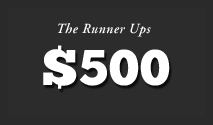
<style>
.page{position:relative;width:213px;height:125px;background:#2c2c2c}
.page>*{position:absolute;margin:0}
.t1{font:14px "AGaramond-SemiboldItalicOsF";letter-spacing:0.025em;color:#ffffff}
.t2{font:50px "ChunkFive-Roman";letter-spacing:0.025em;color:#ffffff}
</style>
<div class="page">
<p class="t1" style="left:58px;top:23px;width:93px;height:14px">The Runner Ups</p>
<p class="t2" style="left:43px;top:45px;width:127px;height:44px">$500</p>
</div>
